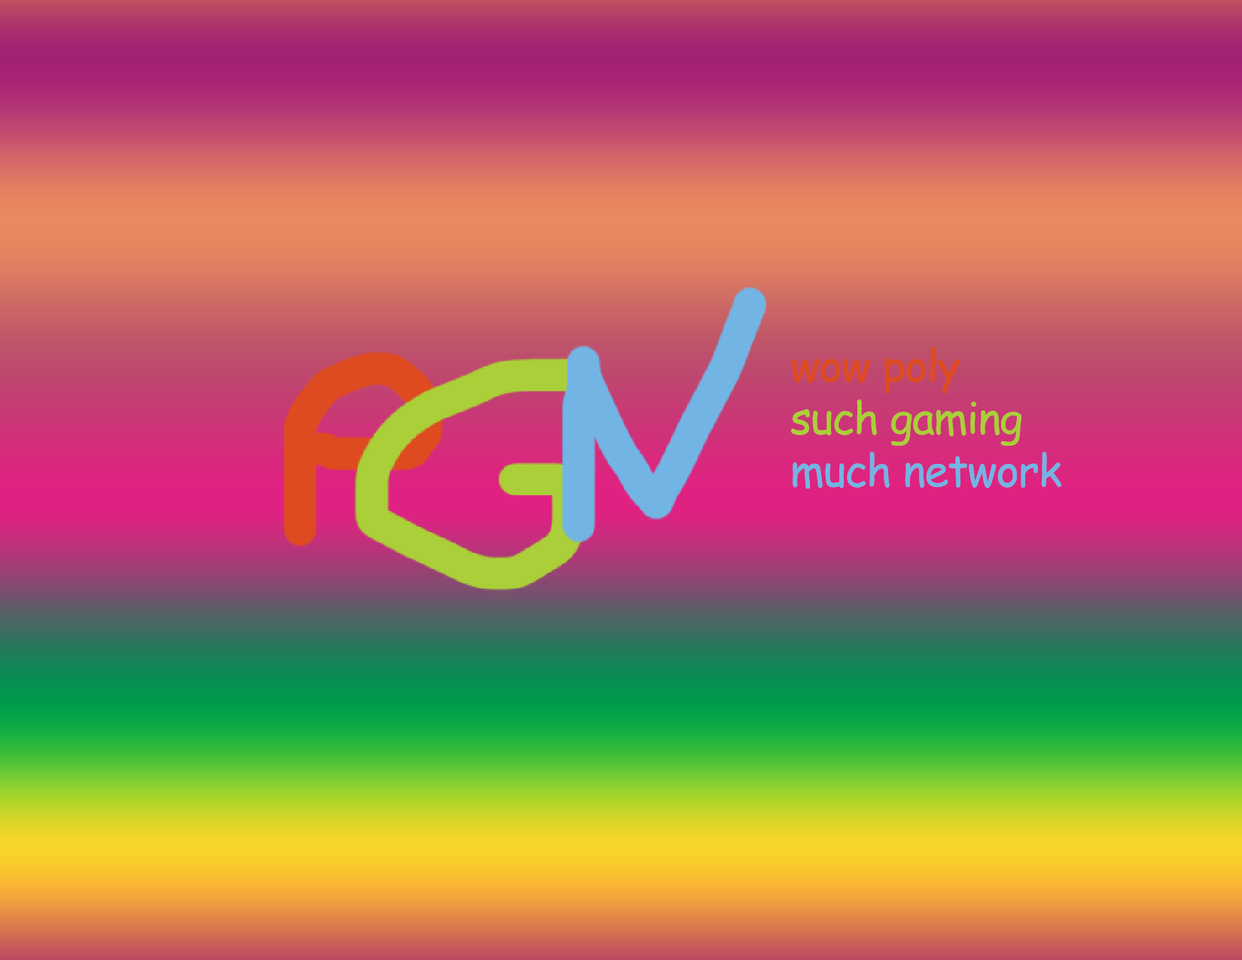
<style>
.page{position:relative;width:1242px;height:960px}
.page>*{position:absolute;margin:0}
.t1{font:43.7px "ComicSansMS";letter-spacing:-0.023em;color:#72b5e4}
.t2{font:43.7px "ComicSansMS";letter-spacing:-0.023em;color:#df4b20}
.t3{font:43.7px "ComicSansMS";letter-spacing:-0.023em;color:#aacf38}
</style>
<div class="page">
<p class="t1" style="left:791px;top:346px;width:271px;height:143px"><span class="t2">wow poly<br></span><span class="t3">such gaming<br></span>much network</p>
</div>
